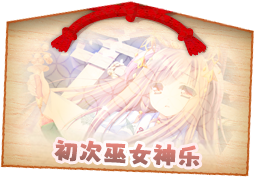
<style>
.page{position:relative;width:255px;height:177px}
.page>*{position:absolute;margin:0}
.t1{font:24px "MaokenAssortedSans";font-weight:bold}
</style>
<div class="page">
<p class="t1" style="left:54px;top:139px;width:146px;height:28px;rotate:3deg">初次巫女神乐</p>
</div>
